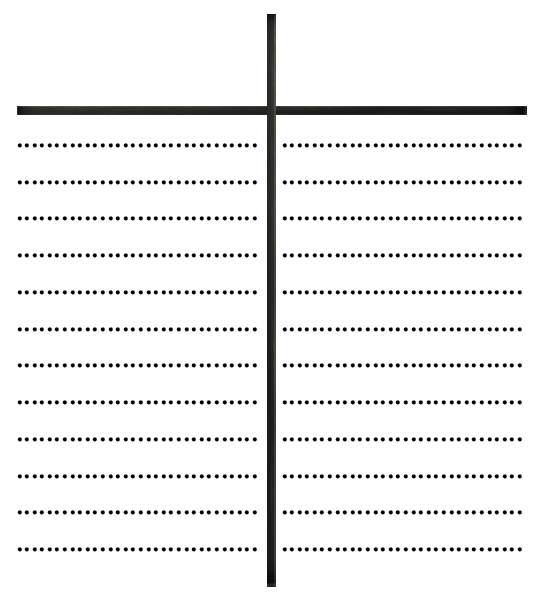
<style>
.page{position:relative;width:549px;height:600px;background:#ffffff}
.page>*{position:absolute;margin:0}
.t1{font:37.6px "Amiri-Regular";color:#000000}
</style>
<div class="page">
<p class="t1" style="left:17px;top:143px;width:240px;height:5px">................................</p>
<p class="t1" style="left:282px;top:143px;width:240px;height:5px">................................</p>
<p class="t1" style="left:17px;top:180px;width:240px;height:5px">................................</p>
<p class="t1" style="left:282px;top:180px;width:240px;height:5px">................................</p>
<p class="t1" style="left:17px;top:216px;width:240px;height:5px">................................</p>
<p class="t1" style="left:282px;top:216px;width:240px;height:5px">................................</p>
<p class="t1" style="left:17px;top:253px;width:240px;height:5px">................................</p>
<p class="t1" style="left:282px;top:253px;width:240px;height:5px">................................</p>
<p class="t1" style="left:17px;top:290px;width:240px;height:5px">................................</p>
<p class="t1" style="left:282px;top:290px;width:240px;height:5px">................................</p>
<p class="t1" style="left:17px;top:327px;width:240px;height:5px">................................</p>
<p class="t1" style="left:282px;top:327px;width:240px;height:5px">................................</p>
<p class="t1" style="left:17px;top:363px;width:240px;height:5px">................................</p>
<p class="t1" style="left:282px;top:363px;width:240px;height:5px">................................</p>
<p class="t1" style="left:17px;top:400px;width:240px;height:5px">................................</p>
<p class="t1" style="left:282px;top:400px;width:240px;height:5px">................................</p>
<p class="t1" style="left:17px;top:437px;width:240px;height:5px">................................</p>
<p class="t1" style="left:282px;top:437px;width:240px;height:5px">................................</p>
<p class="t1" style="left:17px;top:474px;width:240px;height:5px">................................</p>
<p class="t1" style="left:282px;top:474px;width:240px;height:5px">................................</p>
<p class="t1" style="left:17px;top:510px;width:240px;height:5px">................................</p>
<p class="t1" style="left:282px;top:510px;width:240px;height:5px">................................</p>
<p class="t1" style="left:17px;top:547px;width:240px;height:5px">................................</p>
<p class="t1" style="left:282px;top:547px;width:240px;height:5px">................................</p>
</div>
